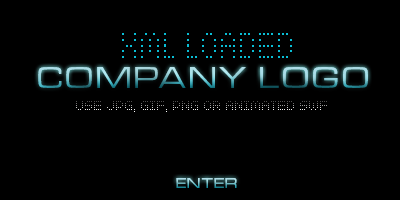
<style>
.page{position:relative;width:400px;height:200px;background:#000000}
.page>*{position:absolute;margin:0}
.t1{font:33.6px "Zado";color:#09bed5;scale:0.71 1}
.t2{font:30px "MicrogrammaDOT-MedExt";letter-spacing:0.1em}
.t3{font:12px "Zado"}
.t4{font:14px "MicrogrammaDOT-MedExt";letter-spacing:0.1em}
</style>
<div class="page">
<p class="t1" style="left:122px;top:33px;width:170px;height:25px">XML LOADED</p>
<p class="t2" style="left:38px;top:67px;width:330px;height:21px">COMPANY LOGO</p>
<p class="t2" style="left:38px;top:67px;width:330px;height:21px">COMPANY LOGO</p>
<p class="t3" style="left:76px;top:101px;width:251px;height:11px">USE JPG, GIF, PNG OR ANIMATED SWF</p>
<p class="t4" style="left:176px;top:178px;width:61px;height:10px">ENTER</p>
<p class="t4" style="left:176px;top:178px;width:61px;height:10px">ENTER</p>
</div>
